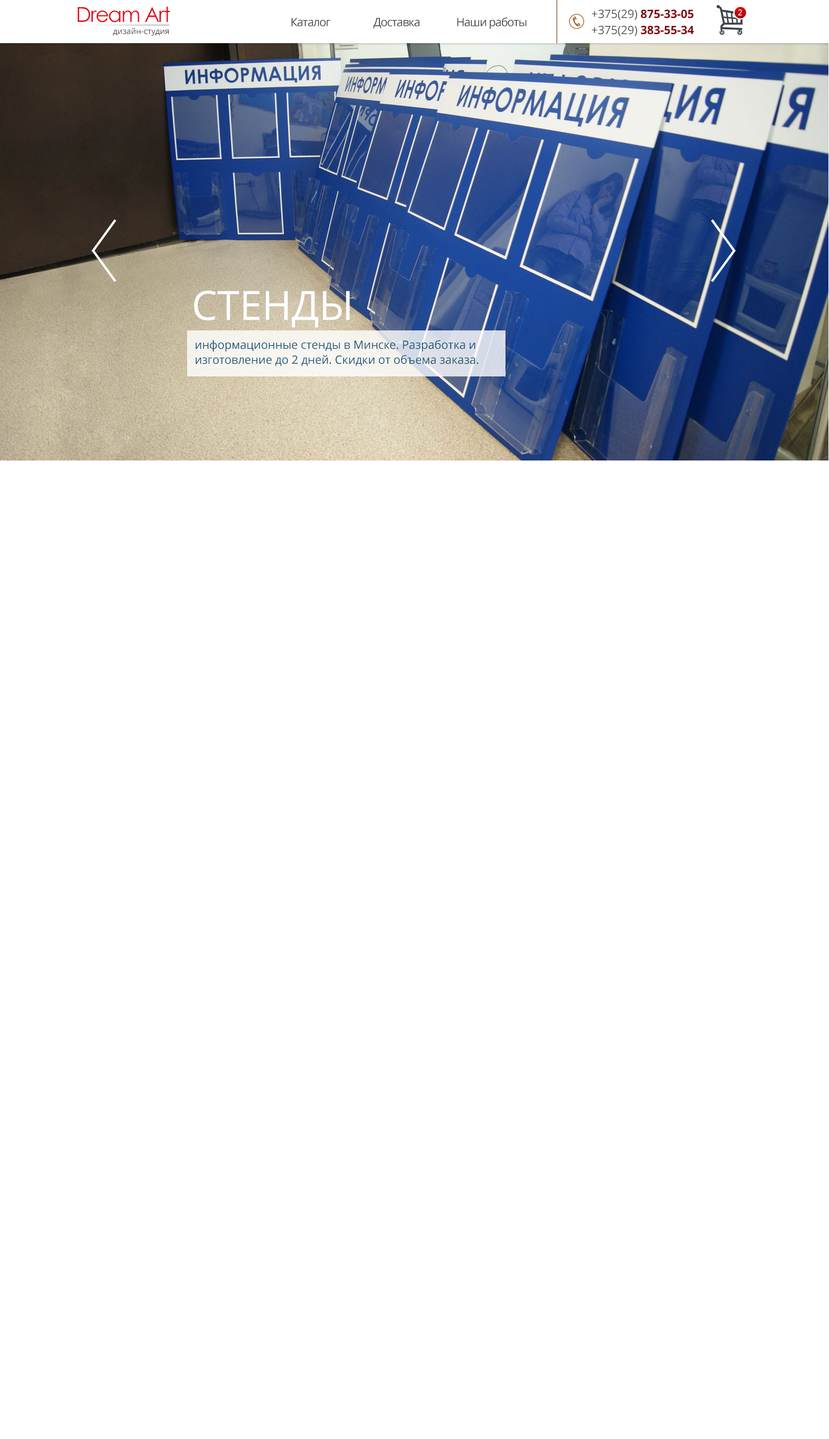
<style>
.page{position:relative;width:829px;height:1439px;background:#ffffff}
.page>*{position:absolute;margin:0}
.t1{font:20.7px "CenturyGothic";letter-spacing:-0.05em;color:#e30613}
.t2{font:11.5px "OpenSans";letter-spacing:-0.05em;color:#3f3f3f}
.t3{font:11.5px "OpenSans-Bold";color:#7e0109}
.t4{font:11.5px "OpenSans";color:#4f4f4f}
.t5{font:8.1px "OpenSans";color:#ffffff}
.t6{font:8.1px "OpenSans";color:#3f3f3f}
.t7{font:40.3px "OpenSans";color:#ffffff}
.t8{font:11.5px/15px "OpenSans";color:#135275}
</style>
<div class="page">
<p class="t1" style="left:78px;top:6px;width:92px;height:16px">Dream Art</p>
<p class="t2" style="left:291px;top:17px;width:236px;height:12px">Каталог    Доставка  Наши работы</p>
<p class="t3" style="left:592px;top:9px;width:102px;height:11px"><span class="t4">+375(29) </span>875-33-05</p>
<p class="t5" style="left:738px;top:9px;width:4px;height:7px">2</p>
<p class="t6" style="left:113px;top:28px;width:56px;height:8px">дизайн-студия</p>
<p class="t3" style="left:592px;top:25px;width:102px;height:11px"><span class="t4">+375(29) </span>383-55-34</p>
<p class="t7" style="left:194px;top:291px;width:156px;height:36px">СТЕНДЫ</p>
<p class="t8" style="left:196px;top:340px;width:282px;height:26px">информационные стенды в Минске. Разработка и изготовление до 2 дней. Скидки от объема заказа.</p>
</div>
